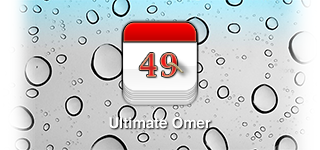
<style>
.page{position:relative;width:320px;height:150px}
.page>*{position:absolute;margin:0}
.t1{font:27.8px "CapitalsRegular";letter-spacing:0.07em;font-variant:small-caps}
.t2{font:15px "Helvetica-Bold";color:#ffffff}
</style>
<div class="page">
<p class="t1" style="left:139px;top:53px;width:38px;height:24px">49</p>
<p class="t2" style="left:109px;top:117px;width:102px;height:12px">Ultimate Omer</p>
</div>
